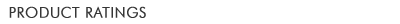
<style>
.page{position:relative;width:400px;height:24px;background:#ffffff}
.page>*{position:absolute;margin:0}
.t1{font:14.7px "FuturaBT-Light";letter-spacing:0.025em;color:#363636;text-transform:uppercase;font-weight:bold}
</style>
<div class="page">
<p class="t1" style="left:9px;top:6px;width:137px;height:12px">PRODUCT RATINGS</p>
</div>
